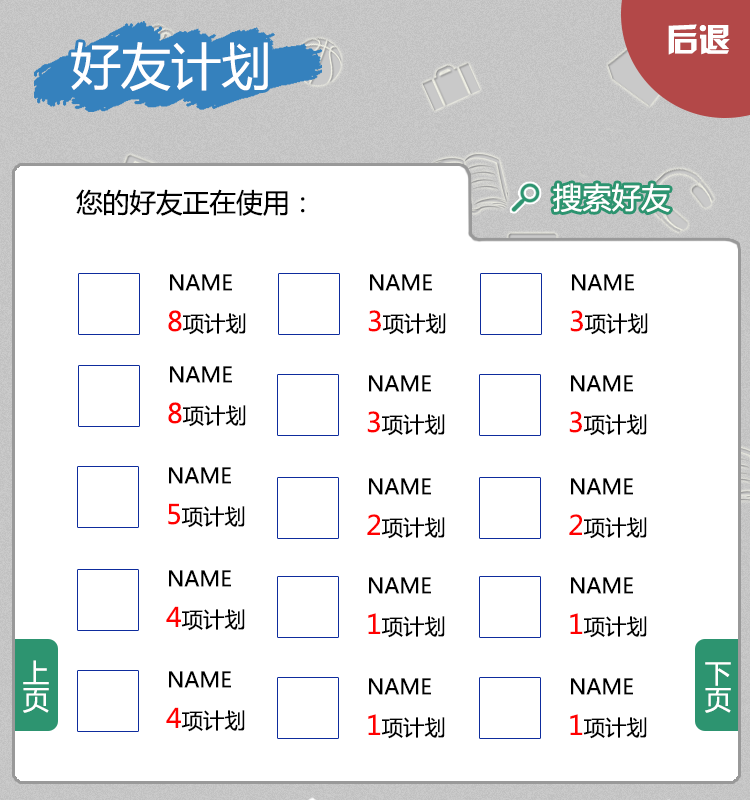
<style>
.page{position:relative;width:750px;height:800px;background:#ffffff}
.page>*{position:absolute;margin:0}
.t1{font:50.2px "MicrosoftYaHei";color:#ffffff}
.t2{font:29.3px "MicrosoftYaHei";color:#ffffff}
.t3{font:26.7px "MicrosoftYaHei";color:#000000}
.t4{font:21.3px "MicrosoftYaHei";color:#000000}
.t5{font:26.7px "MicrosoftYaHei";color:#ff0000}
.t6{font:26.7px "MicrosoftYaHei";color:#ffffff}
</style>
<div class="page">
<p class="t1" style="left:71px;top:42px;width:197px;height:49px">好友计划</p>
<p class="t2" style="left:553px;top:183px;width:117px;height:30px">搜索好友</p>
<p class="t3" style="left:76px;top:189px;width:229px;height:27px">您的好友正在使用：</p>
<p class="t4" style="left:170px;top:274px;width:62px;height:17px">NAME</p>
<p class="t4" style="left:370px;top:274px;width:62px;height:17px">NAME</p>
<p class="t4" style="left:572px;top:274px;width:62px;height:17px">NAME</p>
<p class="t4" style="left:168px;top:310px;width:78px;height:25px"><span class="t5">8</span>项计划</p>
<p class="t4" style="left:368px;top:310px;width:78px;height:25px"><span class="t5">3</span>项计划</p>
<p class="t4" style="left:570px;top:310px;width:78px;height:25px"><span class="t5">3</span>项计划</p>
<p class="t4" style="left:170px;top:366px;width:62px;height:17px">NAME</p>
<p class="t4" style="left:369px;top:375px;width:62px;height:17px">NAME</p>
<p class="t4" style="left:571px;top:375px;width:62px;height:17px">NAME</p>
<p class="t4" style="left:168px;top:402px;width:78px;height:25px"><span class="t5">8</span>项计划</p>
<p class="t4" style="left:367px;top:411px;width:78px;height:25px"><span class="t5">3</span>项计划</p>
<p class="t4" style="left:569px;top:411px;width:78px;height:25px"><span class="t5">3</span>项计划</p>
<p class="t4" style="left:169px;top:467px;width:62px;height:17px">NAME</p>
<p class="t4" style="left:369px;top:478px;width:62px;height:17px">NAME</p>
<p class="t4" style="left:571px;top:478px;width:62px;height:17px">NAME</p>
<p class="t4" style="left:168px;top:503px;width:77px;height:25px"><span class="t5">5</span>项计划</p>
<p class="t4" style="left:367px;top:514px;width:78px;height:25px"><span class="t5">2</span>项计划</p>
<p class="t4" style="left:569px;top:514px;width:78px;height:25px"><span class="t5">2</span>项计划</p>
<p class="t4" style="left:169px;top:570px;width:62px;height:17px">NAME</p>
<p class="t4" style="left:369px;top:577px;width:62px;height:17px">NAME</p>
<p class="t4" style="left:571px;top:577px;width:62px;height:17px">NAME</p>
<p class="t4" style="left:166px;top:606px;width:79px;height:25px"><span class="t5">4</span>项计划</p>
<p class="t4" style="left:368px;top:613px;width:77px;height:25px"><span class="t5">1</span>项计划</p>
<p class="t4" style="left:570px;top:613px;width:77px;height:25px"><span class="t5">1</span>项计划</p>
<p class="t6" style="left:23px;top:660px;width:26px;height:53px">上页</p>
<p class="t6" style="left:705px;top:662px;width:26px;height:51px">下页</p>
<p class="t4" style="left:169px;top:671px;width:62px;height:17px">NAME</p>
<p class="t4" style="left:369px;top:678px;width:62px;height:17px">NAME</p>
<p class="t4" style="left:571px;top:678px;width:62px;height:17px">NAME</p>
<p class="t4" style="left:166px;top:707px;width:79px;height:25px"><span class="t5">4</span>项计划</p>
<p class="t4" style="left:368px;top:714px;width:77px;height:25px"><span class="t5">1</span>项计划</p>
<p class="t4" style="left:570px;top:714px;width:77px;height:25px"><span class="t5">1</span>项计划</p>
</div>
